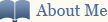
<style>
.page{position:relative;width:108px;height:22px;background:#fdfaf2}
.page>*{position:absolute;margin:0}
.t1{font:17.3px "Georgia";color:#456fa1;scale:0.94 1}
</style>
<div class="page">
<p class="t1" style="left:36px;top:3px;width:71px;height:13px">About Me</p>
</div>
